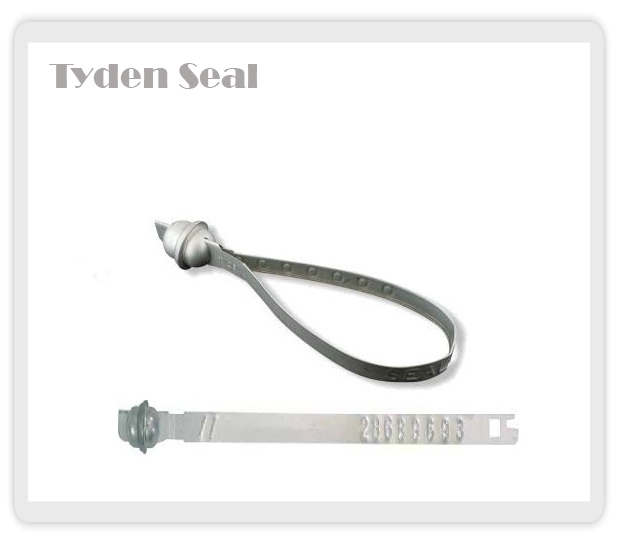
<style>
.page{position:relative;width:618px;height:544px;background:#ffffff}
.page>*{position:absolute;margin:0}
.t1{font:36px "Broadway";color:#aca7a7}
</style>
<div class="page">
<p class="t1" style="left:49px;top:63px;width:208px;height:26px">Tyden Seal</p>
</div>
